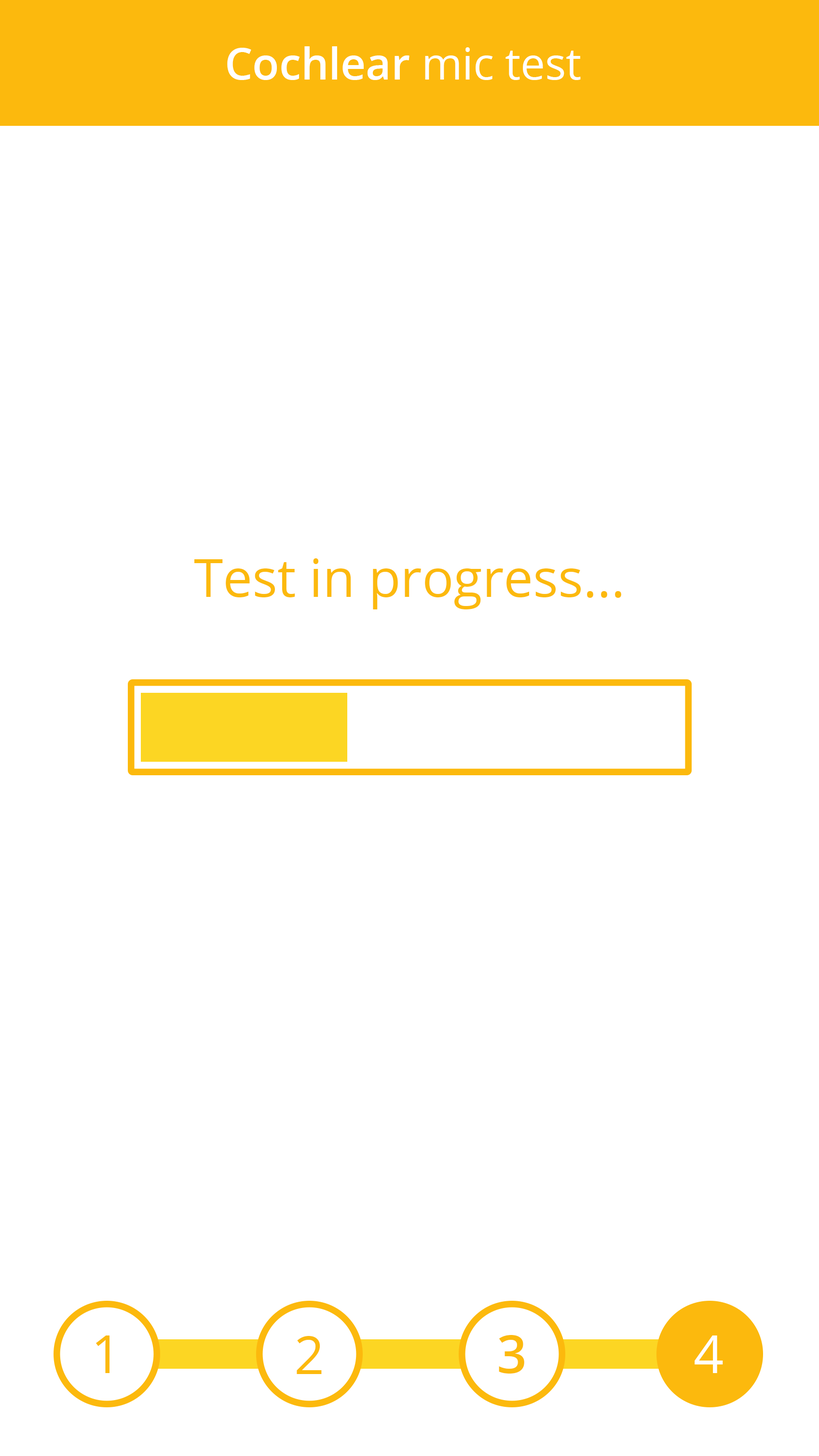
<style>
.page{position:relative;width:819px;height:1456px;background:#ffffff}
.page>*{position:absolute;margin:0}
.t1{font:43.7px "OpenSans-Semibold";color:#ffffff}
.t2{font:43.7px "OpenSans";color:#ffffff}
.t3{font:52.4px "OpenSans";color:#fcb90d}
.t4{font:52.4px "OpenSans-Semibold";color:#fcb90d}
.t5{font:52.4px "OpenSans";color:#ffffff}
</style>
<div class="page">
<p class="t1" style="left:227px;top:46px;width:354px;height:34px">Cochlear <span class="t2">mic test</span></p>
<p class="t3" style="left:194px;top:558px;width:427px;height:52px">Test in progress...</p>
<p class="t3" style="left:95px;top:1336px;width:15px;height:37px">1</p>
<p class="t3" style="left:297px;top:1336px;width:25px;height:38px">2</p>
<p class="t4" style="left:499px;top:1335px;width:25px;height:39px">3</p>
<p class="t5" style="left:694px;top:1336px;width:29px;height:37px">4</p>
</div>
